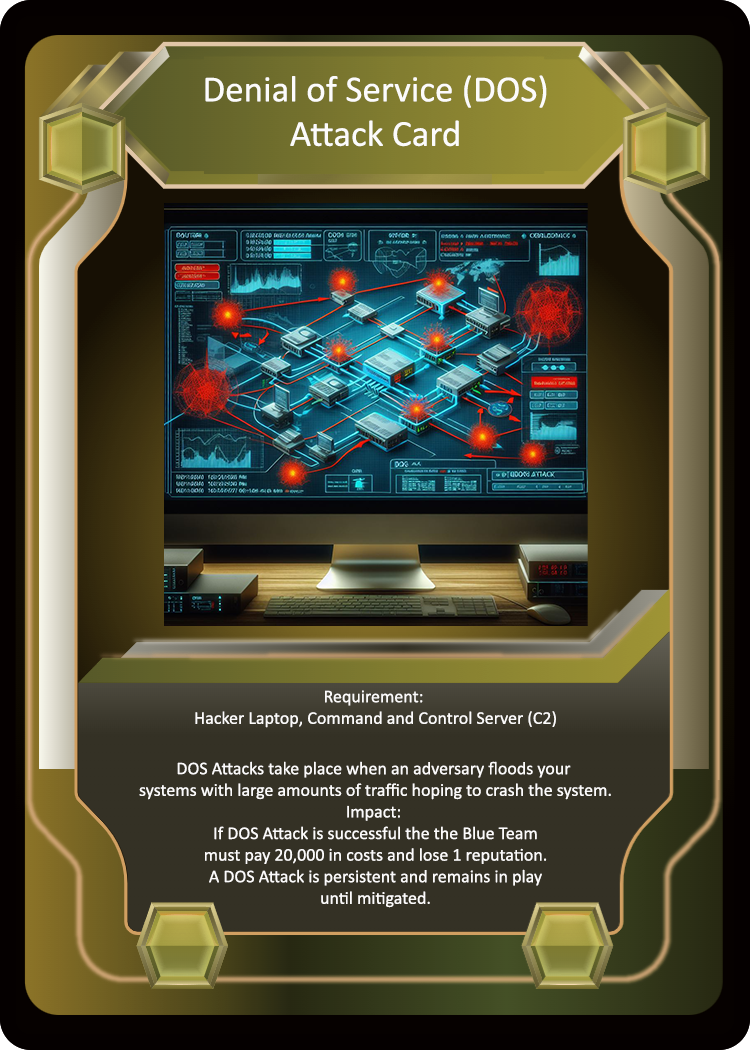
<style>
.page{position:relative;width:750px;height:1050px}
.page>*{position:absolute;margin:0}
.t1{font:37px "Calibri";color:#fcfbfb}
.t2{font:18px "Calibri";color:#fcfbfb}
</style>
<div class="page">
<p class="t1" style="left:205px;top:75px;width:342px;height:72px;text-align:center">Denial of Service (DOS)<br>Attack Card</p>
<p class="t2" style="left:139px;top:690px;width:472px;height:218px;text-align:center">Requirement: <br>Hacker Laptop, Command and Control Server (C2)<br><br>DOS Attacks take place when an adversary floods your <br>systems with large amounts of traffic hoping to crash the system.<br>Impact: <br>If DOS Attack is successful the the Blue Team<br>must pay 20,000 in costs and lose 1 reputation.<br>A DOS Attack is persistent and remains in play<br>until mitigated.</p>
</div>
